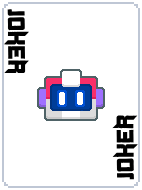
<style>
.page{position:relative;width:142px;height:190px;background:#ffffff}
.page>*{position:absolute;margin:0}
.t1{font:24px "Duplexide";color:#000000}
</style>
<div class="page">
<p class="t1" style="left:4px;top:9px;width:26px;height:65px;rotate:89deg">JOKER</p>
<p class="t1" style="left:112px;top:115px;width:26px;height:65px;rotate:-91deg">JOKER</p>
</div>
